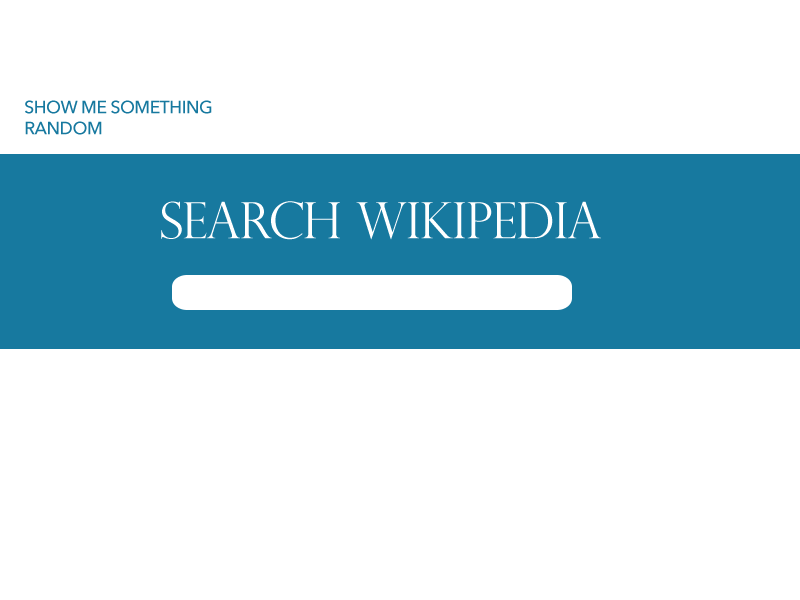
<style>
.page{position:relative;width:800px;height:600px;background:#ffffff}
.page>*{position:absolute;margin:0}
.t1{font:17.5px "AvenirNext-Medium";letter-spacing:-0.025em;color:#1779a0}
.t2{font:50px "PerpetuaTitlingMT-Light";letter-spacing:-0.025em;color:#ffffff}
</style>
<div class="page">
<p class="t1" style="left:25px;top:100px;width:187px;height:35px">SHOW ME SOMETHING <br>RANDOM</p>
<p class="t2" style="left:161px;top:201px;width:440px;height:39px">SEARCH WIKIPEDIA</p>
</div>
